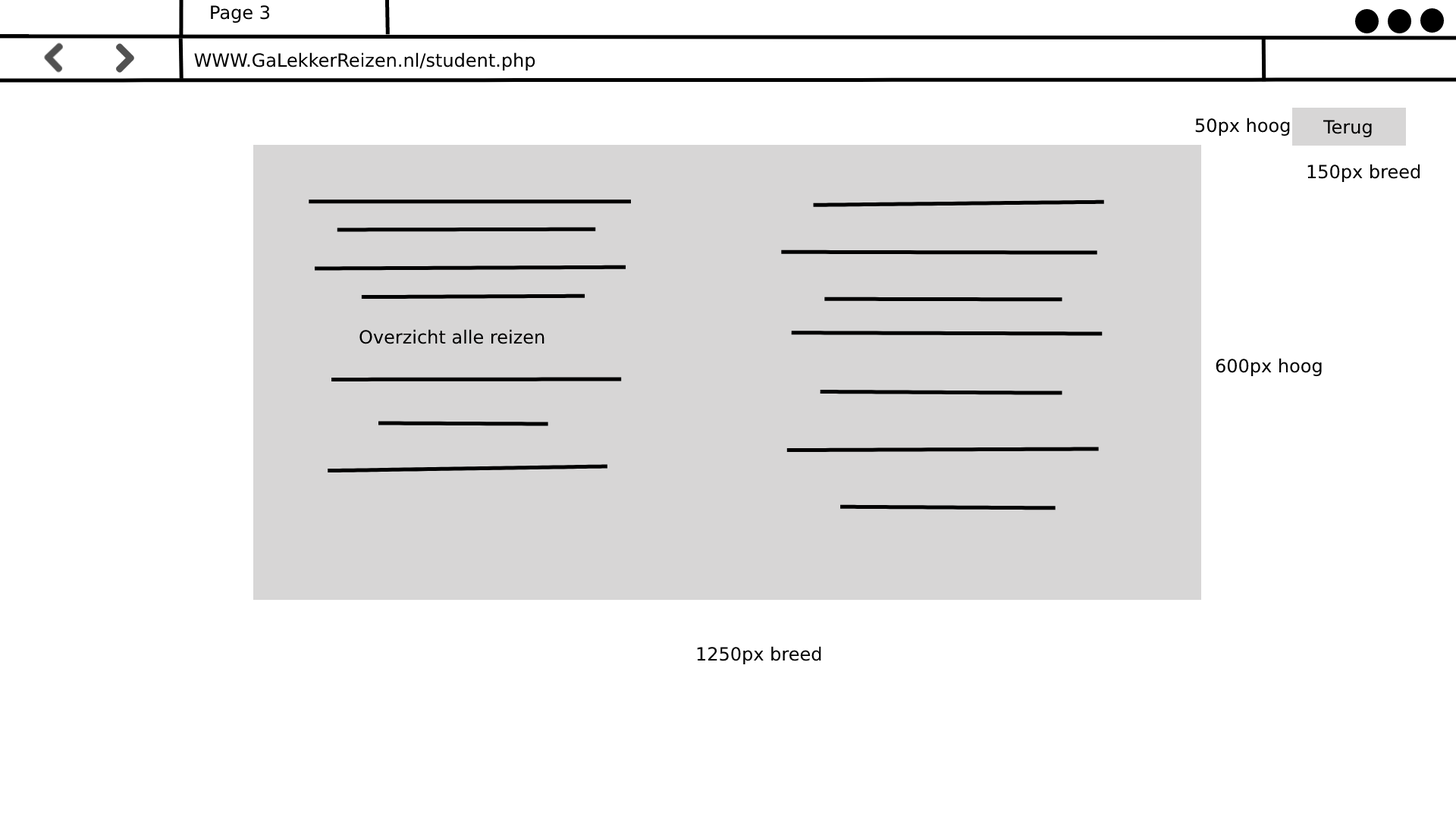
<style>
.page{position:relative;width:1456px;height:819px;background:#ffffff}
.page>*{position:absolute;margin:0}
.t1{font:18.2px "DejaVuSans";color:#000000}
</style>
<div class="page">
<p class="t1" style="left:211px;top:5px;width:59px;height:18px">Page 3</p>
<p class="t1" style="left:194px;top:52px;width:341px;height:19px">WWW.GaLekkerReizen.nl/student.php</p>
<p class="t1" style="left:1195px;top:118px;width:95px;height:18px">50px hoog</p>
<p class="t1" style="left:1323px;top:120px;width:49px;height:17px">Terug</p>
<p class="t1" style="left:1307px;top:164px;width:113px;height:18px">150px breed</p>
<p class="t1" style="left:359px;top:329px;width:185px;height:15px">Overzicht alle reizen</p>
<p class="t1" style="left:1216px;top:358px;width:106px;height:18px">600px hoog</p>
<p class="t1" style="left:697px;top:646px;width:124px;height:18px">1250px breed</p>
</div>
